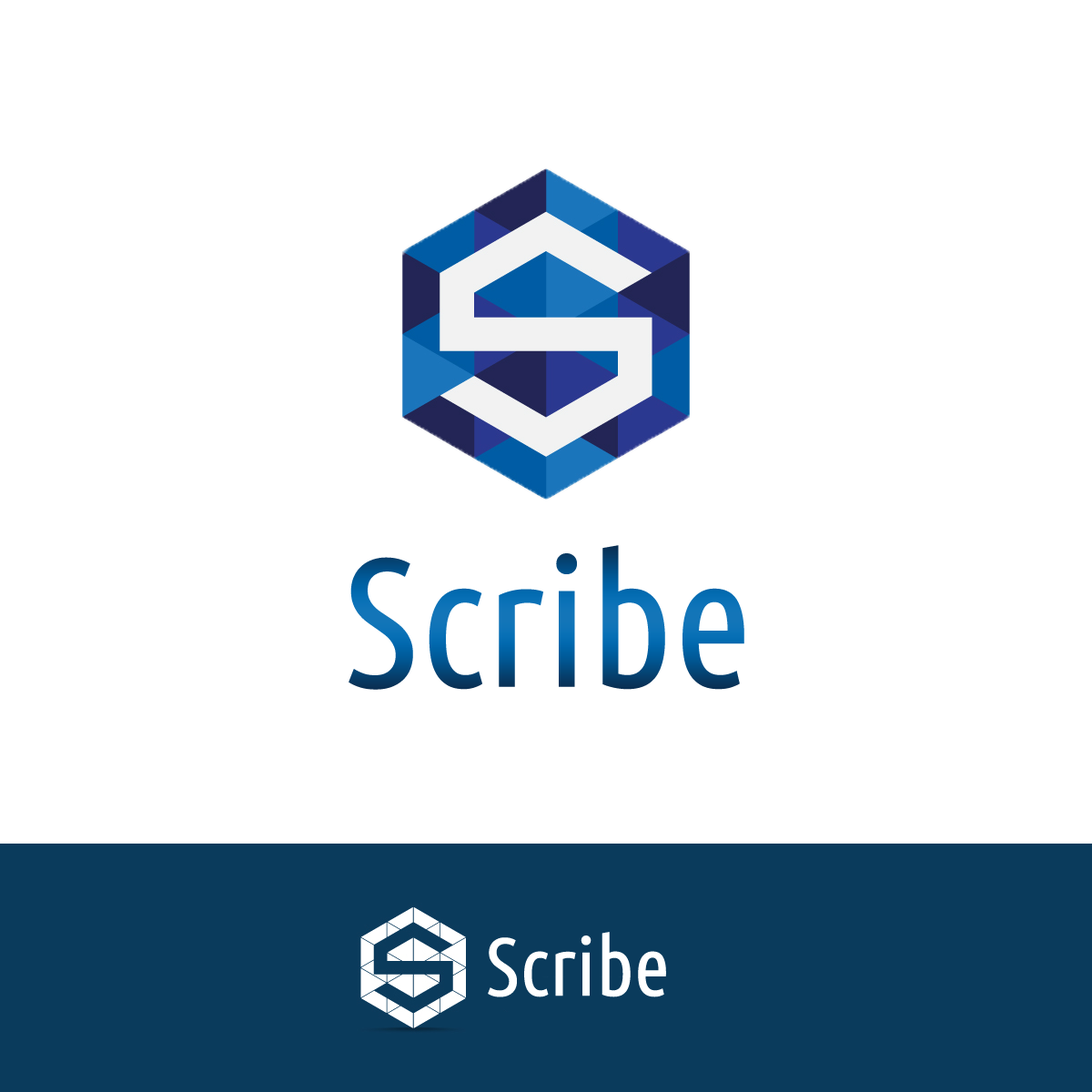
<style>
.page{position:relative;width:1092px;height:1092px;background:#ffffff}
.page>*{position:absolute;margin:0}
.t1{font:182px "UbuntuCondensed-Regular"}
.t2{font:81.9px "UbuntuCondensed-Regular";color:#ffffff}
</style>
<div class="page">
<p class="t1" style="left:349px;top:545px;width:395px;height:145px">Scribe</p>
<p class="t2" style="left:488px;top:932px;width:178px;height:65px">Scribe</p>
</div>
